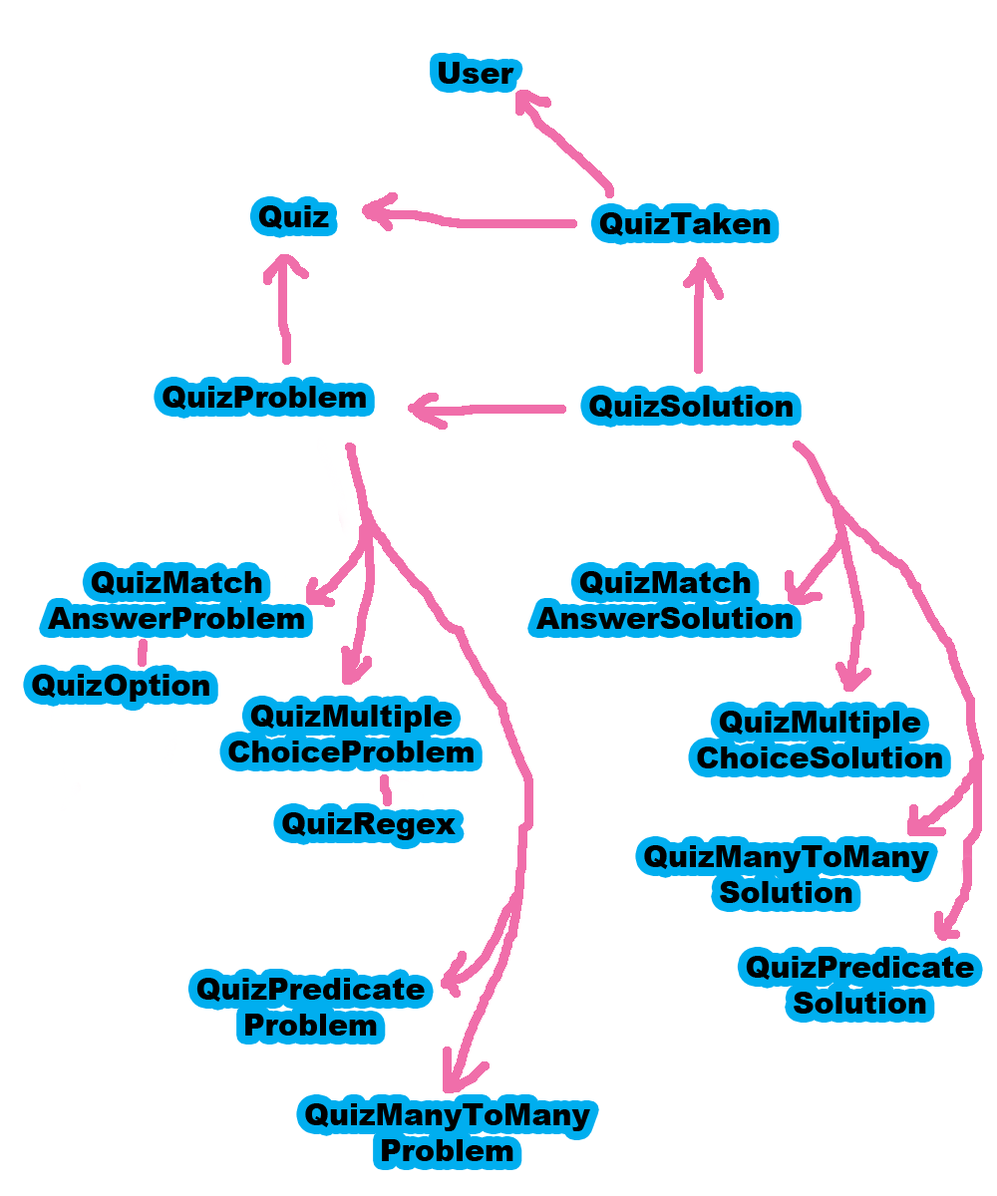
<style>
.page{position:relative;width:997px;height:1196px;background:#ffffff}
.page>*{position:absolute;margin:0}
.t1{font:29.9px "Arial-Black";color:#000000}
</style>
<div class="page">
<p class="t1" style="left:439px;top:62px;width:75px;height:22px">User</p>
<p class="t1" style="left:258px;top:205px;width:71px;height:24px">Quiz</p>
<p class="t1" style="left:599px;top:212px;width:172px;height:24px">QuizTaken</p>
<p class="t1" style="left:162px;top:386px;width:204px;height:24px">QuizProblem</p>
<p class="t1" style="left:589px;top:395px;width:203px;height:24px">QuizSolution</p>
<p class="t1" style="left:48px;top:571px;width:256px;height:58px;text-align:center">QuizMatch<br>AnswerProblem</p>
<p class="t1" style="left:536px;top:571px;width:256px;height:58px;text-align:center">QuizMatch<br>AnswerSolution</p>
<p class="t1" style="left:32px;top:674px;width:177px;height:28px">QuizOption</p>
<p class="t1" style="left:228px;top:705px;width:245px;height:58px;text-align:center">QuizMultiple<br>ChoiceProblem</p>
<p class="t1" style="left:697px;top:711px;width:245px;height:58px;text-align:center">QuizMultiple<br>ChoiceSolution</p>
<p class="t1" style="left:282px;top:812px;width:174px;height:28px">QuizRegex</p>
<p class="t1" style="left:644px;top:845px;width:285px;height:58px;text-align:center">QuizManyToMany<br>Solution</p>
<p class="t1" style="left:746px;top:956px;width:228px;height:58px;text-align:center">QuizPredicate<br>Solution</p>
<p class="t1" style="left:196px;top:978px;width:229px;height:58px;text-align:center">QuizPredicate<br>Problem</p>
<p class="t1" style="left:305px;top:1104px;width:285px;height:57px;text-align:center">QuizManyToMany<br>Problem</p>
</div>
